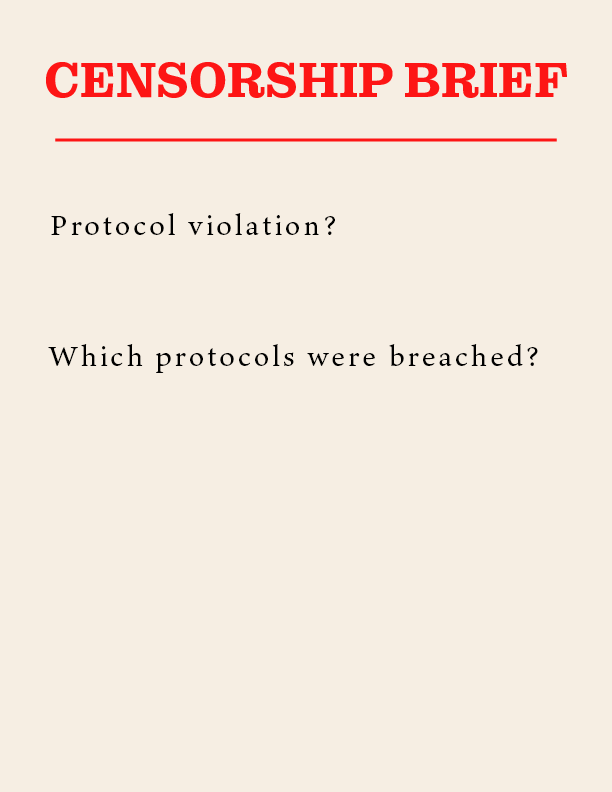
<style>
.page{position:relative;width:612px;height:792px;background:#f6eee3}
.page>*{position:absolute;margin:0}
.t1{font:30px "TenOldstyle-Medium";letter-spacing:0.1em;color:#000000}
</style>
<div class="page">
<p class="t1" style="left:51px;top:213px;width:284px;height:22px">Protocol violation?</p>
<p class="t1" style="left:48px;top:344px;width:490px;height:29px">Which protocols were breached?</p>
</div>
